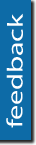
<style>
.page{position:relative;width:36px;height:145px;background:#0d6ba7}
.page>*{position:absolute;margin:0}
.t1{font:22.3px "MyriadPro-Regular";color:#ffffff;scale:1.35 1}
</style>
<div class="page">
<p class="t1" style="left:6px;top:13px;width:17px;height:115px;rotate:-90deg">feedback</p>
</div>
